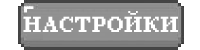
<style>
.page{position:relative;width:200px;height:50px;background:#ffffff}
.page>*{position:absolute;margin:0}
.t1{font:19.1px "PixelTimesBold";color:#ffffff}
</style>
<div class="page">
<p class="t1" style="left:23px;top:11px;width:155px;height:21px">НАСТРОЙКИ</p>
</div>
